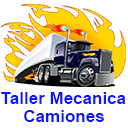
<style>
.page{position:relative;width:128px;height:128px;background:#ffffff}
.page>*{position:absolute;margin:0}
.t1{font:17px "Arial-BoldMT";color:#0d18f3}
</style>
<div class="page">
<p class="t1" style="left:1px;top:92px;width:125px;height:12px">Taller Mecanica</p>
<p class="t1" style="left:24px;top:110px;width:80px;height:12px">Camiones</p>
</div>
